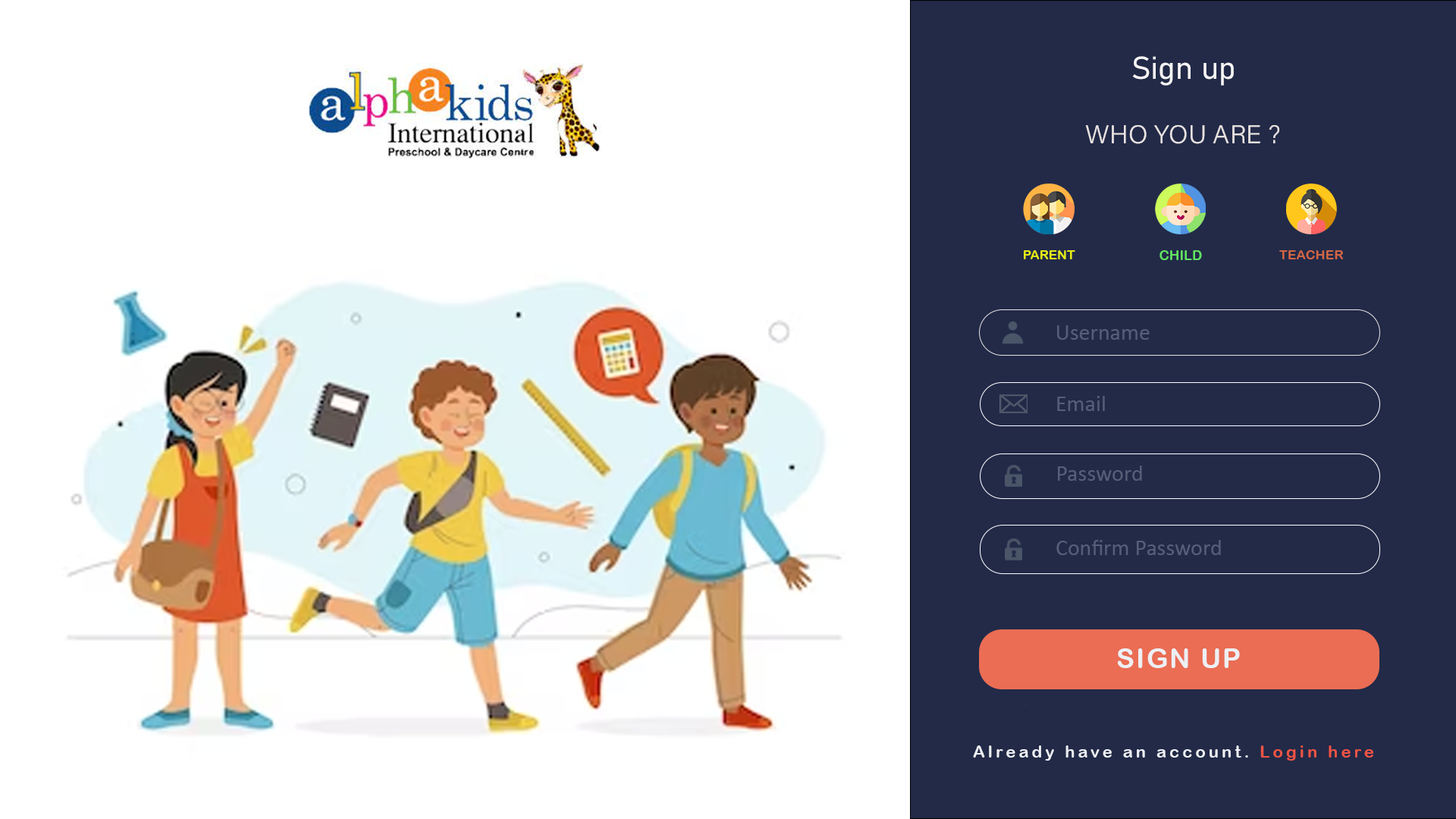
<style>
.page{position:relative;width:1456px;height:819px;background:#ffffff}
.page>*{position:absolute;margin:0}
.t1{font:31.3px "Bahnschrift-SemiLight";color:#f7f6f6}
.t2{font:25.8px "AcuminConcept-Light";color:#e8e2e1}
.t3{font:12.8px "ArialRoundedMTBold";color:#e5ed14}
.t4{font:13.7px "ArialRoundedMTBold";color:#61e261}
.t5{font:13.2px "ArialRoundedMTBold";color:#d26644}
.t6{font:22.7px "Calibri";color:#575e78}
.t7{font:27.2px "ArialRoundedMTBold";letter-spacing:0.06em;color:#edeff4}
.t8{font:0.3px "Calibri";letter-spacing:0.2em;color:#353d5c}
.t9{font:16.4px "ArialRoundedMTBold";letter-spacing:0.2em;color:#edeff4}
.t10{font:16.4px "ArialRoundedMTBold";letter-spacing:0.2em;color:#ef5444}
</style>
<div class="page">
<p class="t1" style="left:1132px;top:56px;width:102px;height:30px">Sign up</p>
<p class="t2" style="left:1085px;top:124px;width:194px;height:20px">WHO YOU ARE ?</p>
<p class="t3" style="left:1024px;top:250px;width:51px;height:9px">PARENT</p>
<p class="t4" style="left:1159px;top:250px;width:43px;height:10px">CHILD</p>
<p class="t5" style="left:1279px;top:250px;width:64px;height:9px">TEACHER</p>
<p class="t6" style="left:1057px;top:325px;width:93px;height:15px">Username</p>
<p class="t6" style="left:1057px;top:396px;width:48px;height:15px">Email</p>
<p class="t6" style="left:1058px;top:466px;width:84px;height:15px">Password</p>
<p class="t6" style="left:1056px;top:540px;width:165px;height:15px">Confirm Password</p>
<p class="t7" style="left:1117px;top:648px;width:123px;height:20px">SIGN UP</p>
<p class="t8" style="left:1025px;top:704px;width:3px;height:2px;text-align:center">Lorem Ipsum</p>
<p class="t9" style="left:973px;top:745px;width:400px;height:16px">Already have an account. <span class="t10">Login here</span></p>
</div>
